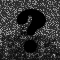
<style>
.page{position:relative;width:60px;height:60px}
.page>*{position:absolute;margin:0}
.t1{font:60px "CooperBlackStd";color:#000000}
</style>
<div class="page">
<p class="t1" style="left:16px;top:9px;width:30px;height:44px">?</p>
</div>
